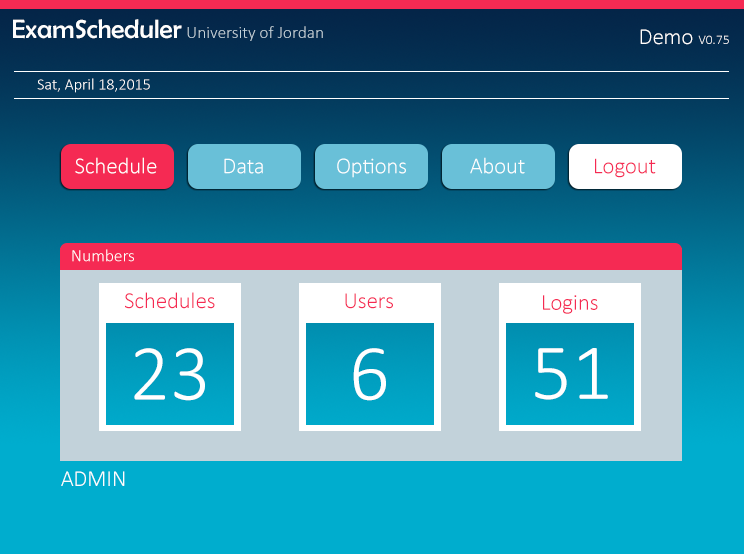
<style>
.page{position:relative;width:744px;height:554px}
.page>*{position:absolute;margin:0}
.t1{font:26.7px "BerlinSansFB-Reg";color:#fefefe}
.t2{font:17.3px "Calibri-Light";color:#c2d2da}
.t3{font:13.3px "Calibri-Light";color:#fefefe}
.t4{font:22.7px "Calibri-Light";color:#fefefe}
.t5{font:16px "Calibri-Light";color:#ffffff}
.t6{font:22.7px "Calibri-Light";color:#f52a53}
.t7{font:17.3px "Calibri-Light";color:#ffffff}
.t8{font:80px "Calibri-Light";color:#ffffff}
</style>
<div class="page">
<p class="t1" style="left:13px;top:19px;width:169px;height:20px">ExamScheduler</p>
<p class="t2" style="left:187px;top:26px;width:136px;height:15px">University of Jordan</p>
<p class="t3" style="left:640px;top:29px;width:89px;height:16px"><span class="t4">Demo </span>V0.75</p>
<p class="t5" style="left:37px;top:78px;width:113px;height:15px">Sat, April 18,2015</p>
<p class="t4" style="left:75px;top:157px;width:82px;height:17px">Schedule</p>
<p class="t4" style="left:224px;top:158px;width:39px;height:16px">Data</p>
<p class="t4" style="left:337px;top:158px;width:69px;height:20px">Options</p>
<p class="t4" style="left:470px;top:157px;width:55px;height:17px">About</p>
<p class="t6" style="left:595px;top:158px;width:61px;height:20px">Logout</p>
<p class="t7" style="left:72px;top:249px;width:62px;height:13px">Numbers</p>
<p class="t6" style="left:125px;top:292px;width:90px;height:17px">Schedules</p>
<p class="t6" style="left:345px;top:293px;width:48px;height:16px">Users</p>
<p class="t6" style="left:543px;top:295px;width:55px;height:19px">Logins</p>
<p class="t8" style="left:134px;top:348px;width:71px;height:53px">23</p>
<p class="t8" style="left:353px;top:348px;width:33px;height:53px">6</p>
<p class="t8" style="left:535px;top:348px;width:73px;height:52px">51</p>
<p class="t4" style="left:61px;top:471px;width:64px;height:15px">ADMIN</p>
</div>
